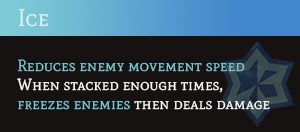
<style>
.page{position:relative;width:300px;height:132px;background:#161211}
.page>*{position:absolute;margin:0}
.t1{font:24px "MateSC-Regular";color:#e2f2f5}
.t2{font:16px "MateSC-Regular";color:#7ecbd6}
.t3{font:16px "MateSC-Regular";color:#ffffff}
</style>
<div class="page">
<p class="t1" style="left:18px;top:9px;width:31px;height:18px">Ice</p>
<p class="t2" style="left:17px;top:59px;width:253px;height:51px"><span class="t3"><br></span>Reduces enemy movement speed<br><span class="t3">When stacked enough times,<br></span>freezes enemies<span class="t3"> then deals damage</span></p>
</div>
